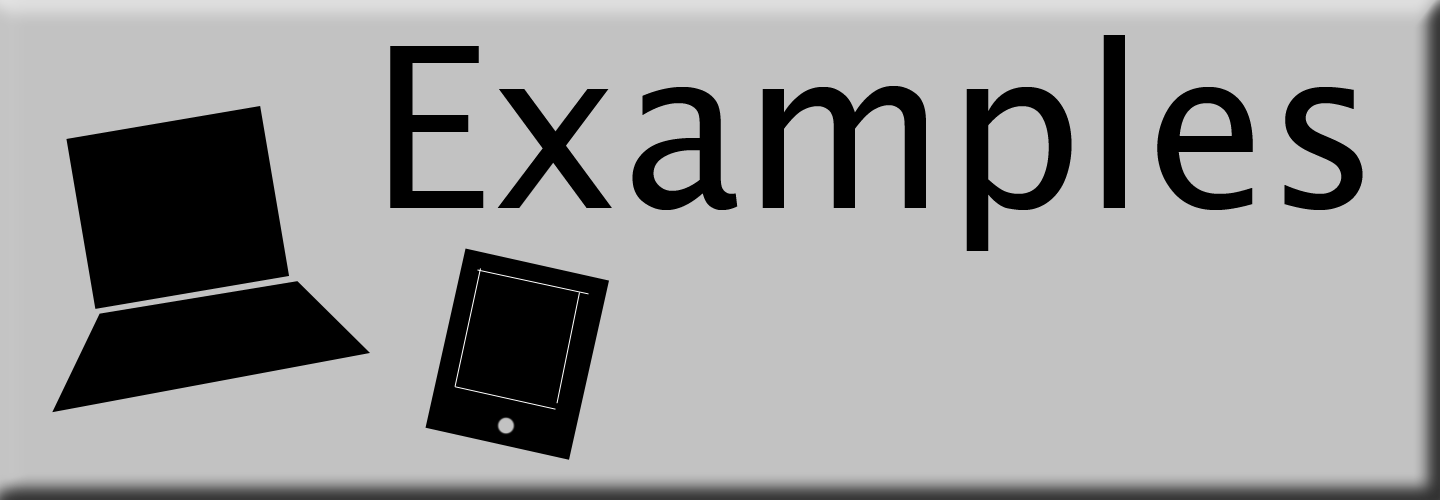
<style>
.page{position:relative;width:1440px;height:500px;background:#c2c2c2}
.page>*{position:absolute;margin:0}
.t1{font:224.2px "LucidaSans";color:#000000}
</style>
<div class="page">
<p class="t1" style="left:390px;top:35px;width:973px;height:216px">Examples</p>
</div>
